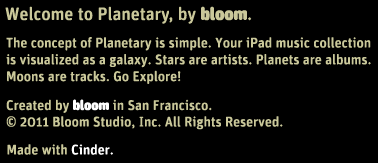
<style>
.page{position:relative;width:378px;height:163px;background:#000000}
.page>*{position:absolute;margin:0}
.t1{font:14px "UnitRoundedOT-Medi";color:#cac89a}
.t2{font:14px "UnitRoundedOT-Ultra";color:#ffffff}
.t3{font:14px "UnitRoundedOT-Medi";color:#ffffff}
</style>
<div class="page">
<p class="t1" style="left:6px;top:37px;width:365px;height:47px;text-align:justify">The concept of Planetary is simple. Your iPad music collection<br>is visualized as a galaxy. Stars are artists. Planets are albums.<br>Moons are tracks. Go Explore!</p>
<p class="t1" style="left:6px;top:99px;width:206px;height:14px">Created by <span class="t2">bloom</span> in San Francisco.</p>
<p class="t1" style="left:6px;top:116px;width:277px;height:14px">© 2011 Bloom Studio, Inc. All Rights Reserved.</p>
<p class="t1" style="left:7px;top:144px;width:106px;height:11px">Made with <span class="t3">Cinder.</span></p>
</div>
